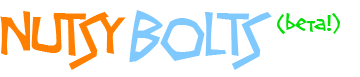
<style>
.page{position:relative;width:360px;height:77px;background:#ffffff}
.page>*{position:absolute;margin:0}
.t1{font:30px "Screwball";color:#04de04}
.t2{font:68px "Screwball";color:#ff8000}
.t3{font:68px "Screwball";color:#80c9ff}
</style>
<div class="page">
<p class="t1" style="left:0px;top:10px;width:340px;height:60px"><span class="t2">NUTSY </span><span class="t3">BOLTS   </span>(beta!)</p>
</div>
